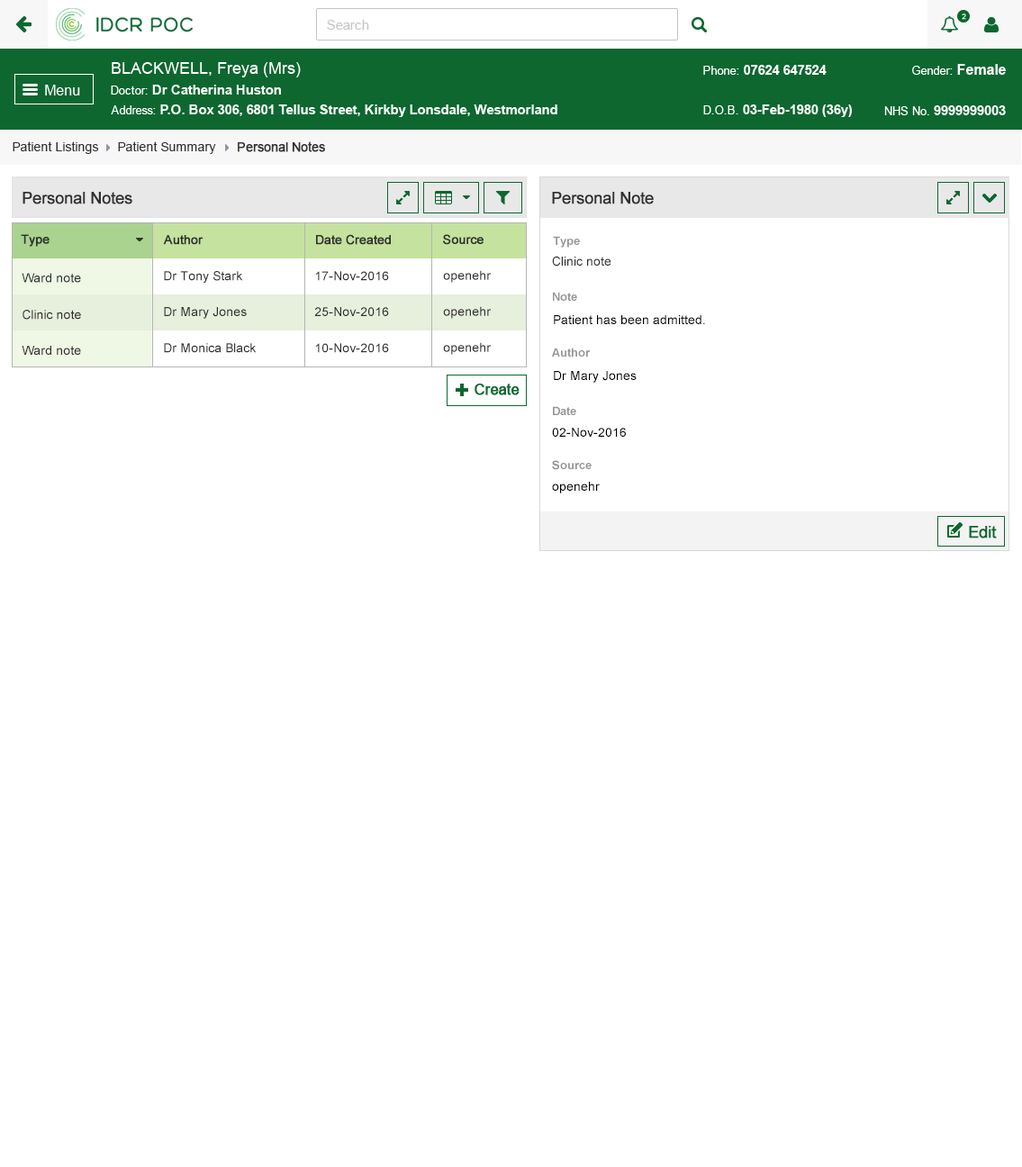
<style>
.page{position:relative;width:1022px;height:1167px;background:#ffffff}
.page>*{position:absolute;margin:0}
.t1{font:12.6px "ArialMT";color:#313131}
.t2{font:12.6px "ArialMT";color:#313131;font-weight:bold}
.t3{font:16.2px "ArialMT";color:#303030;font-weight:bold}
.t4{font:12.6px "ArialMT";color:#303030;font-weight:bold}
.t5{font:11.7px "Arial-BoldMT";color:#959595}
.t6{font:12.6px "ArialMT";color:#303030}
.t7{font:12.6px "ArialMT";color:#000000}
</style>
<div class="page">
<p class="t1" style="left:13px;top:141px;width:86px;height:13px">Patient Listings</p>
<p class="t1" style="left:118px;top:141px;width:98px;height:13px">Patient Summary</p>
<p class="t2" style="left:238px;top:141px;width:87px;height:11px">Personal Notes</p>
<p class="t3" style="left:23px;top:192px;width:109px;height:12px">Personal Notes</p>
<p class="t3" style="left:552px;top:192px;width:102px;height:12px">Personal Note</p>
<p class="t4" style="left:21px;top:234px;width:29px;height:13px">Type</p>
<p class="t4" style="left:163px;top:235px;width:40px;height:10px">Author</p>
<p class="t4" style="left:316px;top:234px;width:75px;height:11px">Date Created</p>
<p class="t4" style="left:443px;top:234px;width:40px;height:11px">Source</p>
<p class="t5" style="left:553px;top:236px;width:27px;height:12px">Type</p>
<p class="t6" style="left:552px;top:256px;width:59px;height:11px">Clinic note</p>
<p class="t6" style="left:22px;top:273px;width:59px;height:10px">Ward note</p>
<p class="t6" style="left:164px;top:271px;width:79px;height:12px">Dr Tony Stark</p>
<p class="t6" style="left:315px;top:271px;width:74px;height:10px">17-Nov-2016</p>
<p class="t6" style="left:443px;top:270px;width:49px;height:13px">openehr</p>
<p class="t5" style="left:553px;top:292px;width:24px;height:9px">Note</p>
<p class="t6" style="left:23px;top:310px;width:58px;height:10px">Clinic note</p>
<p class="t6" style="left:164px;top:307px;width:83px;height:12px">Dr Mary Jones</p>
<p class="t6" style="left:314px;top:307px;width:75px;height:9px">25-Nov-2016</p>
<p class="t6" style="left:443px;top:306px;width:49px;height:13px">openehr</p>
<p class="t7" style="left:554px;top:315px;width:151px;height:9px">Patient has been admitted.</p>
<p class="t6" style="left:22px;top:346px;width:59px;height:9px">Ward note</p>
<p class="t6" style="left:164px;top:343px;width:93px;height:10px">Dr Monica Black</p>
<p class="t6" style="left:315px;top:343px;width:74px;height:10px">10-Nov-2016</p>
<p class="t6" style="left:443px;top:342px;width:49px;height:13px">openehr</p>
<p class="t5" style="left:552px;top:348px;width:39px;height:9px">Author</p>
<p class="t7" style="left:554px;top:371px;width:83px;height:12px">Dr Mary Jones</p>
<p class="t5" style="left:553px;top:406px;width:23px;height:9px">Date</p>
<p class="t7" style="left:552px;top:428px;width:74px;height:9px">02-Nov-2016</p>
<p class="t5" style="left:552px;top:460px;width:40px;height:10px">Source</p>
<p class="t7" style="left:552px;top:482px;width:48px;height:11px">openehr</p>
</div>
